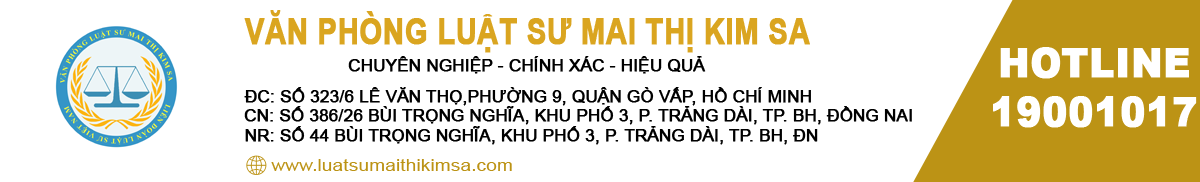
<style>
.page{position:relative;width:1200px;height:182px;background:#ffffff}
.page>*{position:absolute;margin:0}
.t1{font:35.5px "Arial-BoldMT";color:#daa520;text-transform:uppercase;font-weight:bold;scale:0.82 1}
.t2{font:41px "Arial-Black";color:#ffffff;text-transform:uppercase;font-weight:bold;scale:0.91 1}
.t3{font:16.7px "ArialMT";color:#000000;text-transform:uppercase;font-weight:bold}
.t4{font:16.7px "ArialMT";color:#bc9315;scale:1.16 1}
</style>
<div class="page">
<p class="t1" style="left:244px;top:10px;width:566px;height:43px">Văn phòng luật sư Mai Thị Kim Sa</p>
<p class="t2" style="left:993px;top:47px;width:204px;height:81px;text-align:center">Hotline<br>19001017</p>
<p class="t3" style="left:348px;top:56px;width:358px;height:18px">Chuyên Nghiệp - Chính Xác - Hiệu Quả</p>
<p class="t3" style="left:244px;top:87px;width:567px;height:19px">ĐC: số 323/6 lê văn thọ,phường 9, quận gò vấp, hồ chí minh</p>
<p class="t3" style="left:244px;top:106px;width:668px;height:19px">CN: số 386/26 bùi trọng nghĩa, khu phố 3, p. Trảng dài, tp. Bh, đồng nai</p>
<p class="t3" style="left:245px;top:126px;width:573px;height:19px">NR: số 44 bùi trọng nghĩa, khu phố 3, p. Trảng dài, Tp. bh, đn</p>
<p class="t4" style="left:271px;top:159px;width:241px;height:12px">www.luatsumaithikimsa.com</p>
</div>
